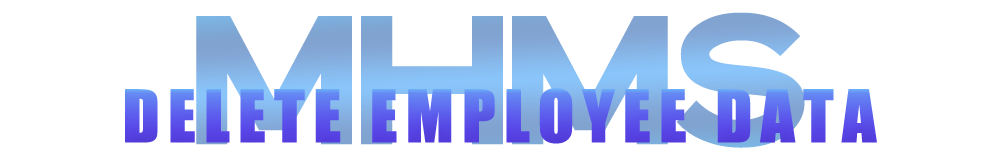
<style>
.page{position:relative;width:1000px;height:160px;background:#ffffff}
.page>*{position:absolute;margin:0}
.t1{font:161.1px "Bristone";letter-spacing:-0.04em}
.t2{font:66.7px "Impact";letter-spacing:0.1em;font-weight:bold}
</style>
<div class="page">
<p class="t1" style="left:196px;top:12px;width:609px;height:136px">mHMS</p>
<p class="t2" style="left:125px;top:88px;width:752px;height:56px">DELETE EMPLOYEE DATA</p>
</div>
